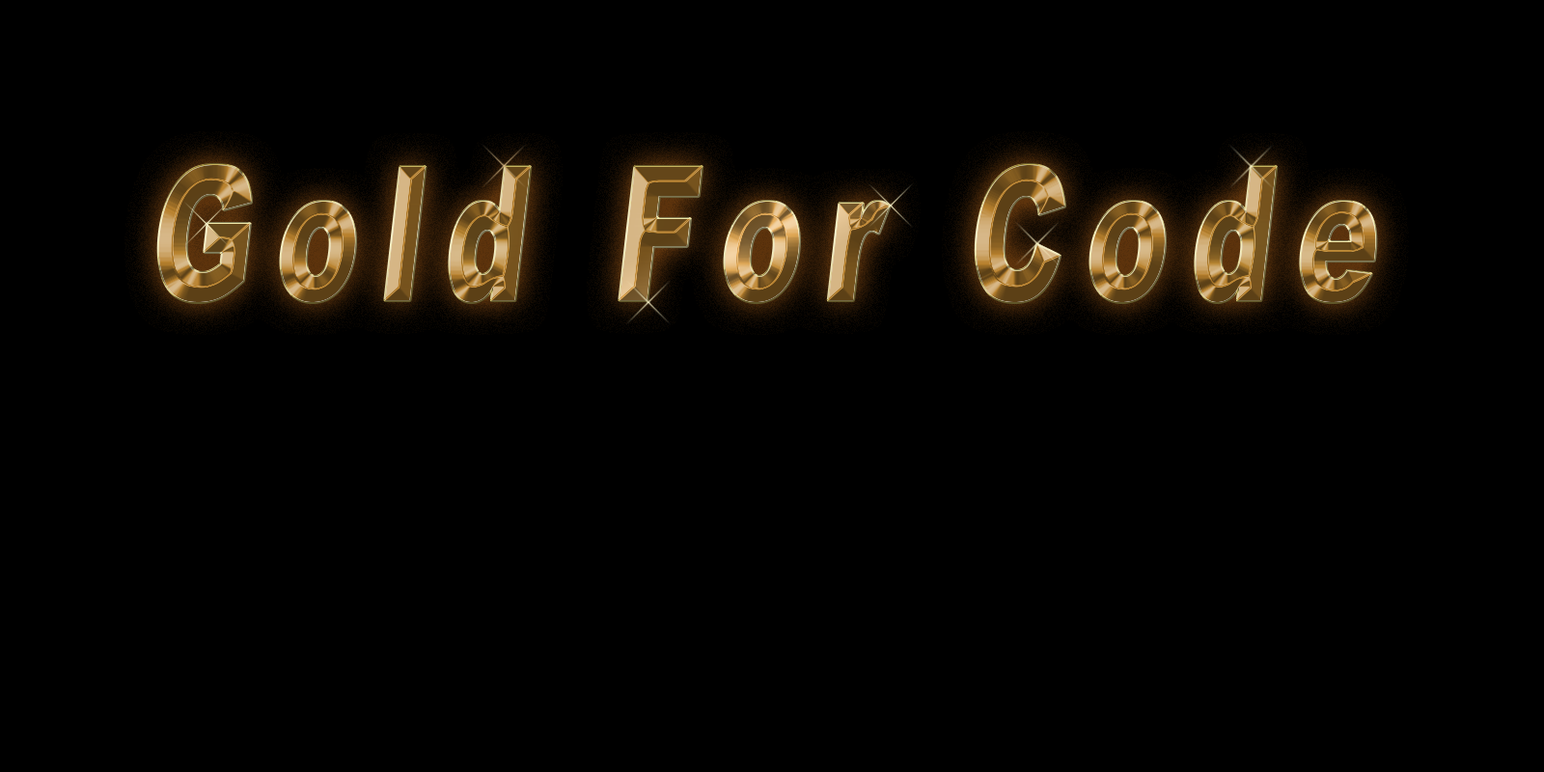
<style>
.page{position:relative;width:1544px;height:772px;background:#000000}
.page>*{position:absolute;margin:0}
.t1{font:185.8px "Arial-Black";letter-spacing:0.2em;font-style:italic;scale:0.65 1}
</style>
<div class="page">
<p class="t1" style="left:158px;top:165px;width:1218px;height:137px">Gold For Code</p>
<p class="t1" style="left:158px;top:165px;width:1218px;height:137px">Gold For Code</p>
</div>
